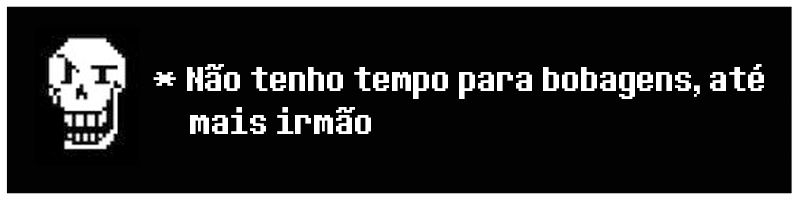
<style>
.page{position:relative;width:800px;height:200px;background:#020202}
.page>*{position:absolute;margin:0}
.t1{font:36px "DeterminationSans";color:#ffffff}
</style>
<div class="page">
<p class="t1" style="left:153px;top:64px;width:611px;height:70px">* Não tenho tempo para bobagens, até   mais irmão</p>
</div>
